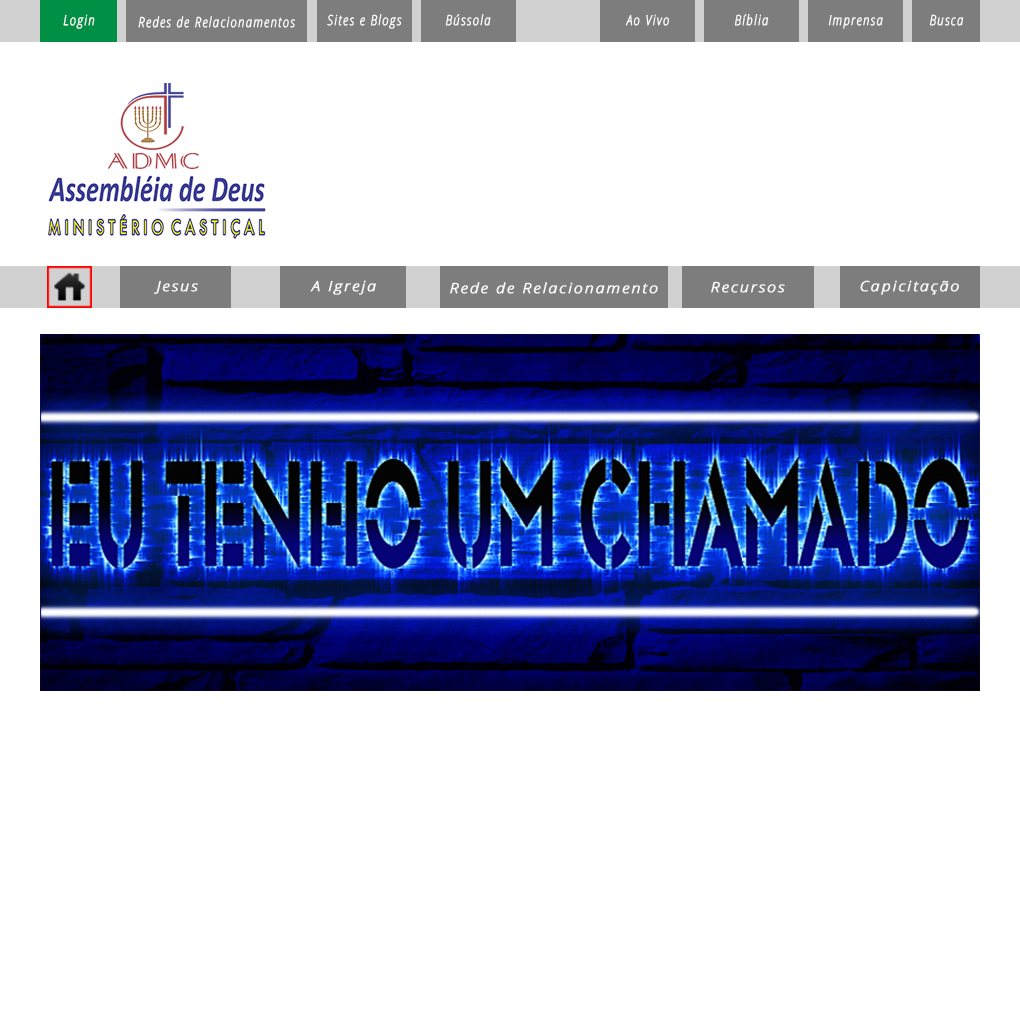
<style>
.page{position:relative;width:1020px;height:1020px;background:#ffffff}
.page>*{position:absolute;margin:0}
.t1{font:14px "OpenSansLight-Italic";letter-spacing:0.105em;color:#ffffff;font-weight:bold;scale:0.79 1}
.t2{font:14px "OpenSansLight-Italic";letter-spacing:0.105em;color:#ffffff;font-weight:bold;scale:1.13 1}
</style>
<div class="page">
<p class="t1" style="left:63px;top:14px;width:32px;height:15px">Login</p>
<p class="t1" style="left:138px;top:16px;width:157px;height:12px">Redes de Relacionamentos</p>
<p class="t1" style="left:327px;top:14px;width:75px;height:15px">Sites e Blogs</p>
<p class="t1" style="left:445px;top:14px;width:46px;height:12px">Bússola</p>
<p class="t1" style="left:625px;top:14px;width:44px;height:12px">Ao Vivo</p>
<p class="t1" style="left:734px;top:14px;width:35px;height:12px">Bíblia</p>
<p class="t1" style="left:828px;top:14px;width:55px;height:15px">Imprensa</p>
<p class="t1" style="left:929px;top:14px;width:35px;height:12px">Busca</p>
<p class="t2" style="left:153px;top:280px;width:45px;height:14px">Jesus</p>
<p class="t2" style="left:310px;top:280px;width:66px;height:15px">A Igreja</p>
<p class="t2" style="left:711px;top:281px;width:74px;height:12px">Recursos</p>
<p class="t2" style="left:860px;top:280px;width:99px;height:15px">Capicitação</p>
<p class="t2" style="left:450px;top:282px;width:208px;height:12px">Rede de Relacionamento</p>
</div>
